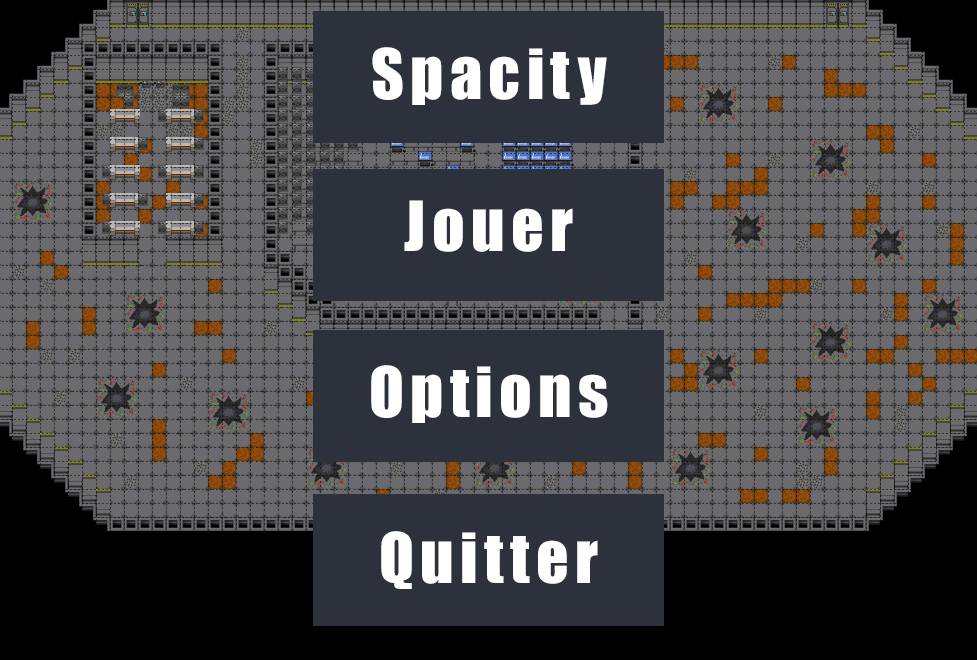
<style>
.page{position:relative;width:977px;height:660px;background:#6b6b6f}
.page>*{position:absolute;margin:0}
.t1{font:64px "Impact";letter-spacing:0.1em;color:#ffffff}
</style>
<div class="page">
<p class="t1" style="left:372px;top:47px;width:235px;height:58px">Spacity</p>
<p class="t1" style="left:404px;top:200px;width:169px;height:52px">Jouer</p>
<p class="t1" style="left:371px;top:365px;width:237px;height:58px">Options</p>
<p class="t1" style="left:381px;top:531px;width:217px;height:58px">Quitter</p>
</div>
